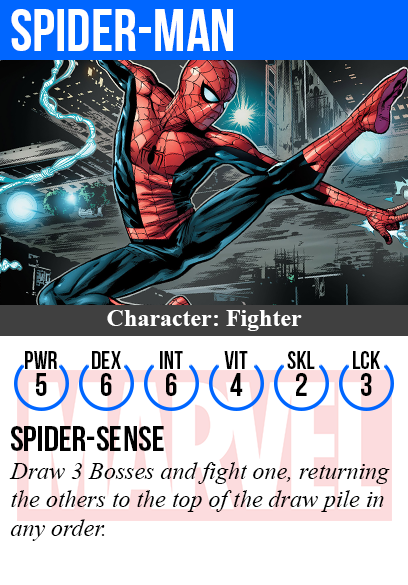
<style>
.page{position:relative;width:408px;height:585px;background:#ffffff}
.page>*{position:absolute;margin:0}
.t1{font:60px "BebasNeue";color:#ffffff}
.t2{font:24px "TimesNewRomanPS-BoldMT";color:#ffffff}
.t3{font:25px "BebasNeue";color:#000000}
.t4{font:32px "BebasNeue";color:#000000}
.t5{font:36px "BebasNeue";color:#000000}
.t6{font:24px "TimesNewRomanPS-ItalicMT";color:#000000}
</style>
<div class="page">
<p class="t1" style="left:11px;top:9px;width:222px;height:42px">spider-man</p>
<p class="t2" style="left:107px;top:310px;width:195px;height:21px">Character: Fighter</p>
<p class="t3" style="left:25px;top:351px;width:32px;height:18px">PWR</p>
<p class="t3" style="left:92px;top:351px;width:29px;height:18px">dex</p>
<p class="t3" style="left:160px;top:351px;width:23px;height:18px">int</p>
<p class="t3" style="left:224px;top:351px;width:24px;height:18px">vit</p>
<p class="t3" style="left:287px;top:351px;width:28px;height:18px">skl</p>
<p class="t3" style="left:353px;top:351px;width:27px;height:18px">lck</p>
<p class="t4" style="left:36px;top:373px;width:11px;height:23px">5</p>
<p class="t4" style="left:101px;top:373px;width:11px;height:23px">6</p>
<p class="t4" style="left:166px;top:373px;width:11px;height:23px">6</p>
<p class="t4" style="left:230px;top:373px;width:13px;height:23px">4</p>
<p class="t4" style="left:296px;top:373px;width:11px;height:23px">2</p>
<p class="t4" style="left:361px;top:373px;width:11px;height:23px">3</p>
<p class="t5" style="left:11px;top:426px;width:153px;height:25px">spider-sense</p>
<p class="t6" style="left:9px;top:462px;width:381px;height:79px">Draw 3 Bosses and fight one, returning<br>the others to the top of the draw pile in<br>any order.</p>
</div>
